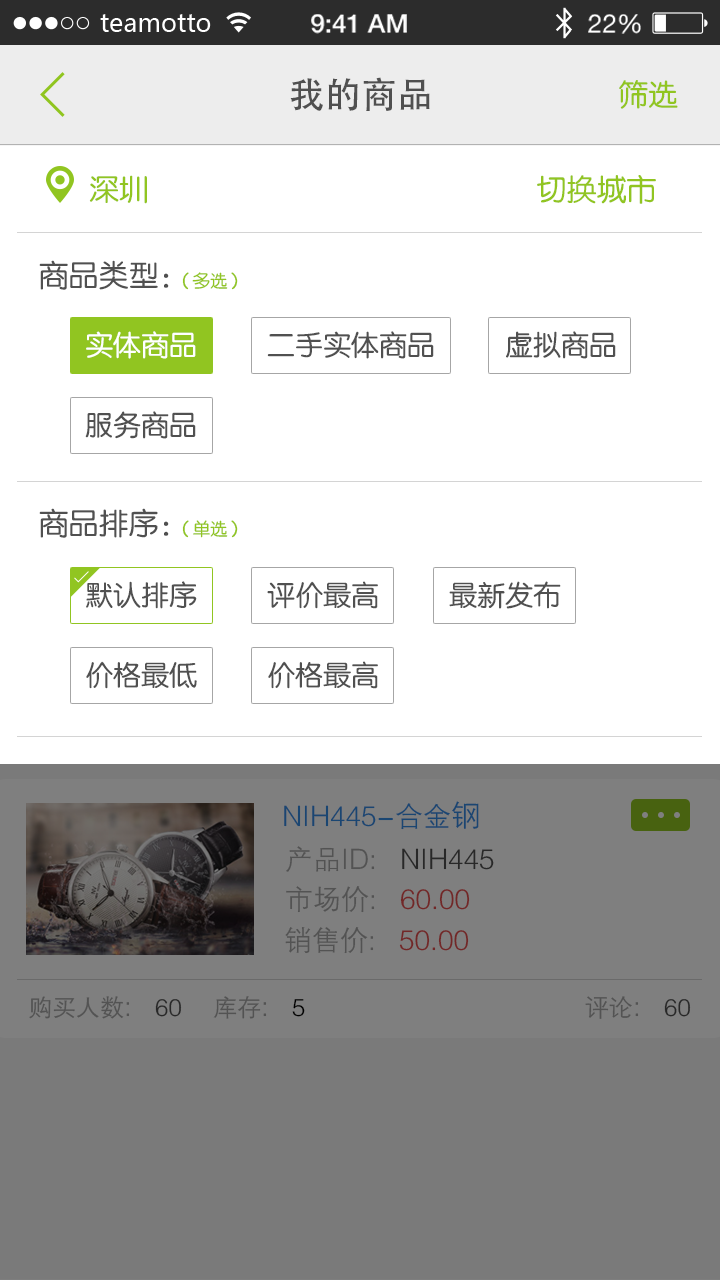
<style>
.page{position:relative;width:720px;height:1280px;background:#ffffff}
.page>*{position:absolute;margin:0}
.t1{font:36px "AdobeHeitiStd-Regular";color:#505050}
.t2{font:30px "FZY3JW--GB1-0";color:#91c521}
.t3{font:30px "FZY3JW--GB1-0";color:#505050}
.t4{font:28px/80px "FZY3JW--GB1-0";color:#505050}
.t5{font:28px/80px "FZY3JW--GB1-0";color:#ffffff}
.t6{font:28px "FZY3JW--GB1-0";color:#505050}
.t7{font:28px "FZZDXJW--GB1-0";color:#1a4672}
.t8{font:30px "FZZDXJW--GB1-0";color:#1a4672}
.t9{font:28px "FZZDXJW--GB1-0"}
.t10{font:24px "FZZDXJW--GB1-0";color:#a6a6a6}
.t11{font:28px "FZZDXJW--GB1-0";color:#a6a6a6}
.t12{font:24px "FZZDXJW--GB1-0";color:#505050}
.t13{font:24px "FZZDXJW--GB1-0";color:#535353}
.t14{font:28px "FZZDXJW--GB1-0";color:#535353}
</style>
<div class="page">
<p class="t1" style="left:290px;top:77px;width:140px;height:34px">我的商品</p>
<p class="t2" style="left:619px;top:80px;width:59px;height:29px">筛选</p>
<p class="t2" style="left:89px;top:175px;width:58px;height:29px">深圳</p>
<p class="t2" style="left:537px;top:175px;width:119px;height:29px">切换城市</p>
<p class="t3" style="left:39px;top:260px;width:130px;height:30px">商品类型：</p>
<p class="t2" style="left:182px;top:272px;width:56px;height:18px">（多选）</p>
<p class="t4" style="left:85px;top:331px;width:531px;height:108px"><span class="t5">实体商品   </span>       二手实体商品          虚拟商品<br>服务商品</p>
<p class="t3" style="left:39px;top:508px;width:130px;height:30px">商品排序：</p>
<p class="t2" style="left:182px;top:520px;width:56px;height:18px">（单选）</p>
<p class="t4" style="left:86px;top:581px;width:475px;height:108px">默认排序          评价最高          最新发布<br><span class="t6">价格最低          价格最高</span></p>
<p class="t7" style="left:284px;top:801px;width:195px;height:29px">NIH445-合金<span class="t8">钢</span></p>
<p class="t9" style="left:286px;top:846px;width:208px;height:26px">产品ID:   NIH445</p>
<p class="t9" style="left:286px;top:886px;width:184px;height:27px">市场价:   60.00</p>
<p class="t9" style="left:285px;top:927px;width:184px;height:27px">销售价:   50.00</p>
<p class="t10" style="left:29px;top:996px;width:153px;height:23px">购买人数<span class="t11">:   </span><span class="t12">60</span></p>
<p class="t13" style="left:213px;top:996px;width:92px;height:23px">库存<span class="t14">:   </span>5</p>
<p class="t10" style="left:585px;top:996px;width:106px;height:23px">评论<span class="t11">:   </span><span class="t12">60</span></p>
</div>
